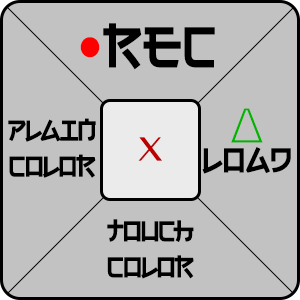
<style>
.page{position:relative;width:300px;height:300px;background:#c2c2c2}
.page>*{position:absolute;margin:0}
.t1{font:60px "Electroharmonix-Regular";color:#000000}
.t2{font:60px "Electroharmonix-Regular";color:#ff0000}
.t3{font:36px/30px "Electroharmonix-Regular";color:#000000}
.t4{font:60px/30px "CourierNewPSMT";color:#00b400}
.t5{font:30px "Electroharmonix-Regular";letter-spacing:-0.05em;color:#000000}
.t6{font:30px "BanglaMN";letter-spacing:-0.05em;color:#bc0000}
</style>
<div class="page">
<p class="t1" style="left:80px;top:23px;width:135px;height:47px"><span class="t2">•</span>REC</p>
<p class="t3" style="left:202px;top:108px;width:89px;height:66px;text-align:center"><span class="t4">∆<br></span>LOAD</p>
<p class="t5" style="left:8px;top:118px;width:88px;height:60px;text-align:center">PLAIN<br>COLOR</p>
<p class="t6" style="left:138px;top:137px;width:24px;height:24px">X</p>
<p class="t5" style="left:107px;top:219px;width:87px;height:60px;text-align:center">TOUCH<br>COLOR</p>
</div>
